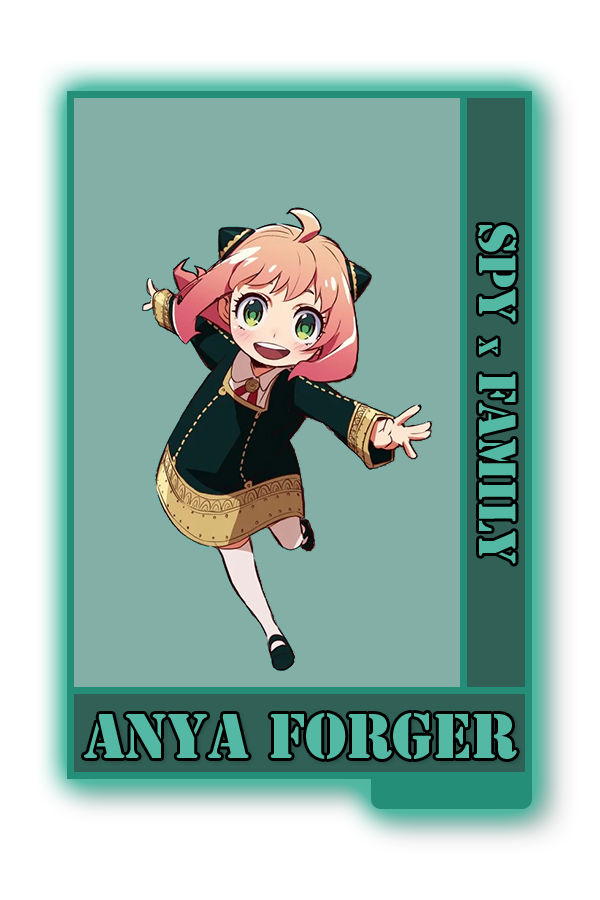
<style>
.page{position:relative;width:600px;height:900px;background:#84afa6}
.page>*{position:absolute;margin:0}
.t1{font:48.8px "StencilStd";color:#54b9a4}
.t2{font:25px "StencilStd";color:#54b9a4}
.t3{font:58.3px "StencilStd";color:#54b9a4}
</style>
<div class="page">
<p class="t1" style="left:478px;top:225px;width:39px;height:339px;rotate:90deg">Spy <span class="t2">x</span> Family</p>
<p class="t3" style="left:84px;top:713px;width:433px;height:46px">Anya Forger</p>
</div>
